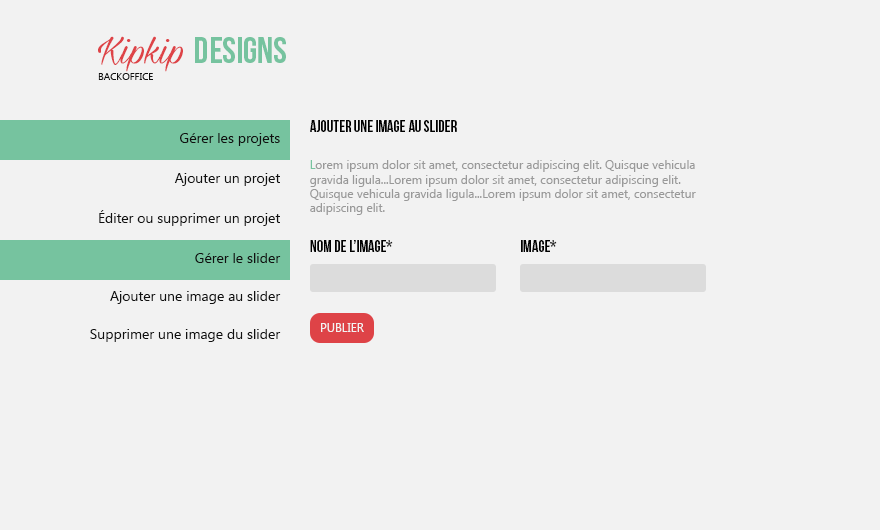
<style>
.page{position:relative;width:880px;height:530px;background:#f2f2f2}
.page>*{position:absolute;margin:0}
.t1{font:10px/17px "SegoeUI";color:#111111}
.t2{font:44px/17px "MilasianCircaPERSONAL";color:#de4347}
.t3{font:37px/17px "BebasNeue";color:#76c39f}
.t4{font:16px "BebasNeue";color:#000000}
.t5{font:14px "SegoeUI";color:#111111}
.t6{font:12px "SegoeUI";color:#999999}
.t7{font:12px "SegoeUI";color:#76c39f}
.t8{font:12px "SegoeUI";color:#f2f2f2}
</style>
<div class="page">
<p class="t1" style="left:98px;top:36px;width:188px;height:44px"><span class="t2">Kipkip </span><span class="t3">DESIGNS<br></span>BACKOFFICE</p>
<p class="t4" style="left:310px;top:120px;width:147px;height:12px">AJOUTER UNE IMAGE AU SLIDER</p>
<p class="t5" style="left:180px;top:133px;width:100px;height:13px">Gérer les projets</p>
<p class="t6" style="left:310px;top:160px;width:386px;height:55px"><span class="t7">L</span>orem ipsum dolor sit amet, consectetur adipiscing elit. Quisque vehicula gravida ligula...Lorem ipsum dolor sit amet, consectetur adipiscing elit. Quisque vehicula gravida ligula...Lorem ipsum dolor sit amet, consectetur adipiscing elit.</p>
<p class="t5" style="left:174px;top:173px;width:106px;height:13px">Ajouter un projet</p>
<p class="t5" style="left:99px;top:210px;width:181px;height:16px">Éditer ou supprimer un projet</p>
<p class="t4" style="left:310px;top:240px;width:83px;height:12px">NOM De l’image*</p>
<p class="t4" style="left:521px;top:240px;width:36px;height:12px">IMAGE*</p>
<p class="t5" style="left:195px;top:253px;width:86px;height:10px">Gérer le slider</p>
<p class="t5" style="left:110px;top:291px;width:171px;height:13px">Ajouter une image au slider</p>
<p class="t5" style="left:90px;top:329px;width:191px;height:13px">Supprimer une image du slider</p>
<p class="t8" style="left:321px;top:323px;width:43px;height:9px">PUBLIER</p>
</div>
